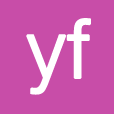
<style>
.page{position:relative;width:114px;height:114px;background:#c84da8}
.page>*{position:absolute;margin:0}
.t1{font:82px "HelveticaNeue-Light";color:#ffffff;font-weight:bold}
</style>
<div class="page">
<p class="t1" style="left:26px;top:18px;width:65px;height:77px">yf</p>
</div>
